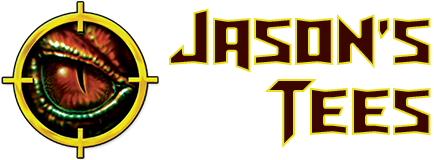
<style>
.page{position:relative;width:434px;height:160px;background:#ffffff}
.page>*{position:absolute;margin:0}
.t1{font:77px/70px "Turok";color:#3b0500}
</style>
<div class="page">
<p class="t1" style="left:169px;top:8px;width:262px;height:140px;text-align:right">Jason’s Tees</p>
</div>
